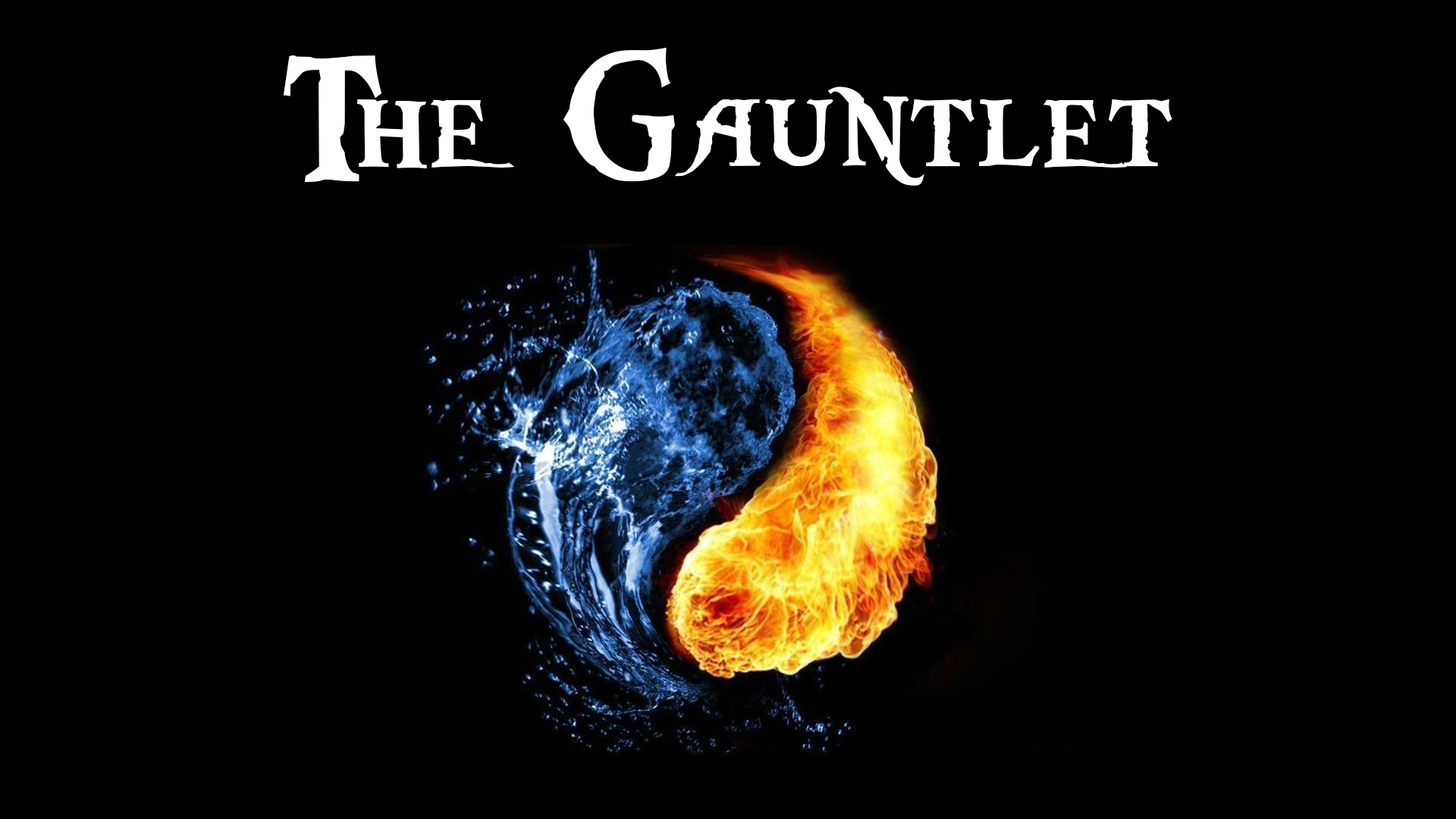
<style>
.page{position:relative;width:1456px;height:819px;background:#000000}
.page>*{position:absolute;margin:0}
.t1{font:189.6px "PiecesofEight";color:#ffffff}
</style>
<div class="page">
<p class="t1" style="left:284px;top:48px;width:888px;height:138px">The Gauntlet</p>
</div>
